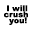
<style>
.page{position:relative;width:32px;height:32px;background:#ffffff}
.page>*{position:absolute;margin:0}
.t1{font:8px/6px "Arial-Black";color:#000000}
</style>
<div class="page">
<p class="t1" style="left:4px;top:5px;width:24px;height:20px">I will<br>crush<br>  you!</p>
</div>
